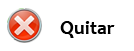
<style>
.page{position:relative;width:134px;height:51px;background:#ffffff}
.page>*{position:absolute;margin:0}
.t1{font:20px "Candara-Bold";color:#000000}
</style>
<div class="page">
<p class="t1" style="left:60px;top:21px;width:55px;height:17px">Quitar</p>
</div>
